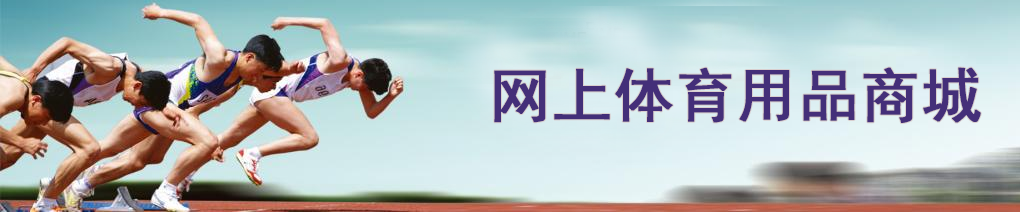
<style>
.page{position:relative;width:1020px;height:212px}
.page>*{position:absolute;margin:0}
.t1{font:59.4px "SimHei";color:#442f79;font-weight:bold}
</style>
<div class="page">
<p class="t1" style="left:494px;top:67px;width:487px;height:56px">网上体育用品商城</p>
</div>
